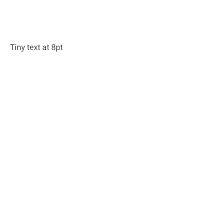
<style>
.page{position:relative;width:200px;height:200px;background:#ffffff}
.page>*{position:absolute;margin:0}
.t1{font:8px "Roboto-Regular"}
</style>
<div class="page">
<p class="t1" style="left:10px;top:44px;width:53px;height:8px">Tiny text at 8pt</p>
</div>
